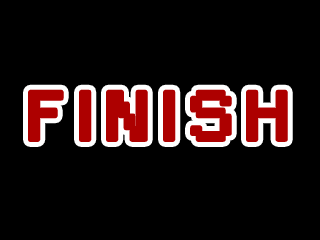
<style>
.page{position:relative;width:320px;height:240px;background:#000000}
.page>*{position:absolute;margin:0}
.t1{font:63px "Small Fonts";letter-spacing:0.2em;color:#ad0000;font-weight:bold;scale:1.2 1}
</style>
<div class="page">
<p class="t1" style="left:30px;top:91px;width:256px;height:49px">FINISH</p>
<p class="t1" style="left:30px;top:91px;width:256px;height:49px">FINISH</p>
</div>
